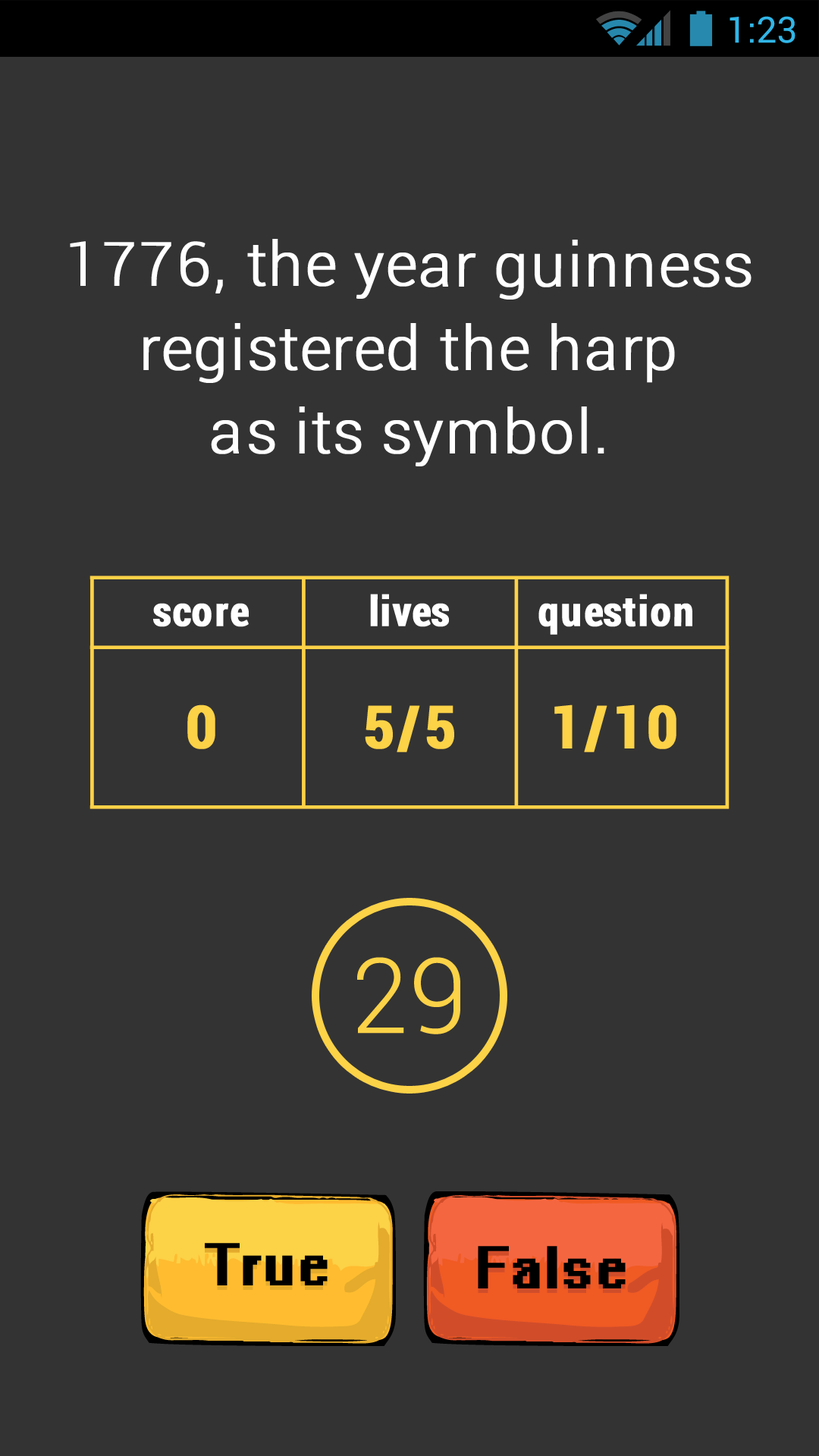
<style>
.page{position:relative;width:819px;height:1456px;background:#333333}
.page>*{position:absolute;margin:0}
.t1{font:36.4px "Roboto-Regular";color:#31b6e7}
.t2{font:60.7px/83.6px "Roboto-Light";letter-spacing:0.02em;color:#ffffff;font-weight:bold}
.t3{font:41.4px "Roboto-BoldCondensed";letter-spacing:0.02em;color:#ffffff;font-weight:bold}
.t4{font:59.2px "Roboto-BoldCondensed";letter-spacing:0.02em;color:#fcd247;font-weight:bold}
.t5{font:104.4px "Roboto-Light";letter-spacing:0.02em;color:#fcd247;font-weight:bold}
.t6{font:53.1px "System";letter-spacing:0.02em;color:#000000;font-weight:bold}
</style>
<div class="page">
<p class="t1" style="left:730px;top:16px;width:65px;height:27px">1:23</p>
<p class="t2" style="left:70px;top:239px;width:681px;height:227px;text-align:center">1776, the year guinness<br>registered the harp<br>as its symbol.</p>
<p class="t3" style="left:370px;top:594px;width:79px;height:33px">lives</p>
<p class="t3" style="left:538px;top:594px;width:154px;height:41px">question</p>
<p class="t3" style="left:153px;top:603px;width:96px;height:24px">score</p>
<p class="t4" style="left:187px;top:704px;width:28px;height:45px">0</p>
<p class="t4" style="left:365px;top:705px;width:89px;height:47px">5/5</p>
<p class="t4" style="left:554px;top:704px;width:122px;height:48px">1/10</p>
<p class="t5" style="left:357px;top:957px;width:103px;height:77px">29</p>
<p class="t6" style="left:205px;top:1243px;width:123px;height:42px">True</p>
<p class="t6" style="left:478px;top:1246px;width:148px;height:42px">False</p>
</div>
